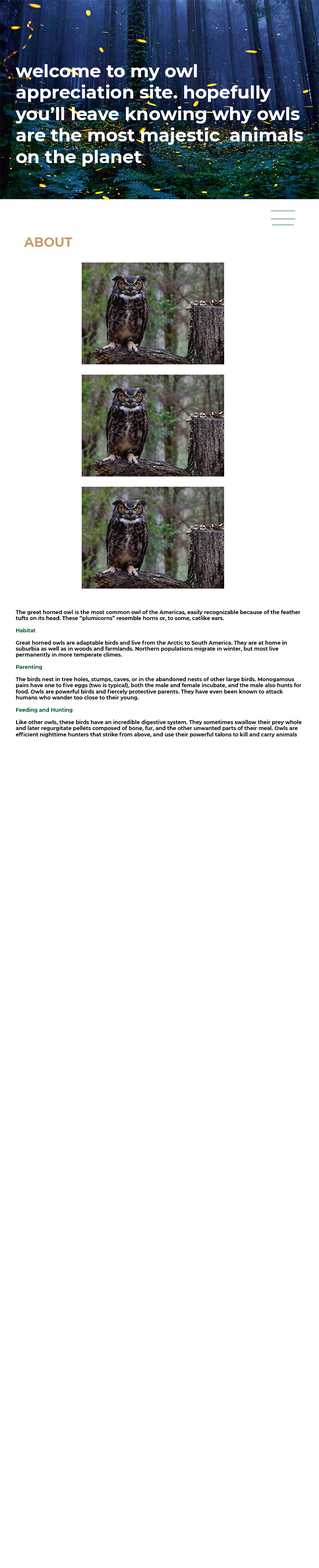
<style>
.page{position:relative;width:319px;height:1568px;background:#ffffff}
.page>*{position:absolute;margin:0}
.t1{font:17.8px "Montserrat-Bold";color:#ffffff}
.t2{font:12.7px "Montserrat-Bold";color:#c69c6d}
.t3{font:5.1px "Montserrat-Bold";color:#000000}
.t4{font:5.1px "Montserrat-Bold";color:#005826}
</style>
<div class="page">
<p class="t1" style="left:15px;top:64px;width:288px;height:102px">welcome to my owl appreciation site. hopefully you’ll leave knowing why owls are the most majestic  animals on the planet</p>
<p class="t2" style="left:24px;top:237px;width:48px;height:10px">ABOUT</p>
<p class="t3" style="left:16px;top:609px;width:285px;height:128px">The great horned owl is the most common owl of the Americas, easily recognizable because of the feather tufts on its head. These “plumicorns” resemble horns or, to some, catlike ears.<br><span class="t4"><br>Habitat<br></span><br>Great horned owls are adaptable birds and live from the Arctic to South America. They are at home in suburbia as well as in woods and farmlands. Northern populations migrate in winter, but most live permanently in more temperate climes.<br><span class="t4"><br>Parenting<br></span><br>The birds nest in tree holes, stumps, caves, or in the abandoned nests of other large birds. Monogamous pairs have one to five eggs (two is typical), both the male and female incubate, and the male also hunts for food. Owls are powerful birds and fiercely protective parents. They have even been known to attack humans who wander too close to their young.<br><span class="t4"><br>Feeding and Hunting<br></span><br>Like other owls, these birds have an incredible digestive system. They sometimes swallow their prey whole and later regurgitate pellets composed of bone, fur, and the other unwanted parts of their meal. Owls are efficient nighttime hunters that strike from above, and use their powerful talons to kill and carry animals several times heavier than themselves. Owls prey on a huge variety of creatures, including raccoons, rabbits, squirrels, domestic birds, falcons, and other owls. They regularly eat skunks, and may be the only animal with such an appetite. They sometimes hunt for smaller game by standing or walking along the ground. Owls have even been known to prey upon unlucky cats and dogs.<br><br><span class="t4">Vocalizations<br></span><br>Great horned owls are largely nocturnal so they can be difficult to spot. But in the dark after sunset, or just before dawn, they can often be heard vocalizing with their well known series of “Hoo H'hoos!”</p>
</div>
